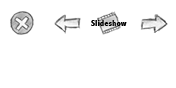
<style>
.page{position:relative;width:176px;height:88px;background:#ffffff}
.page>*{position:absolute;margin:0}
.t1{font:9px "AbadiMT-CondensedExtraBold";color:#000000}
</style>
<div class="page">
<p class="t1" style="left:91px;top:20px;width:36px;height:6px">Slideshow</p>
</div>
